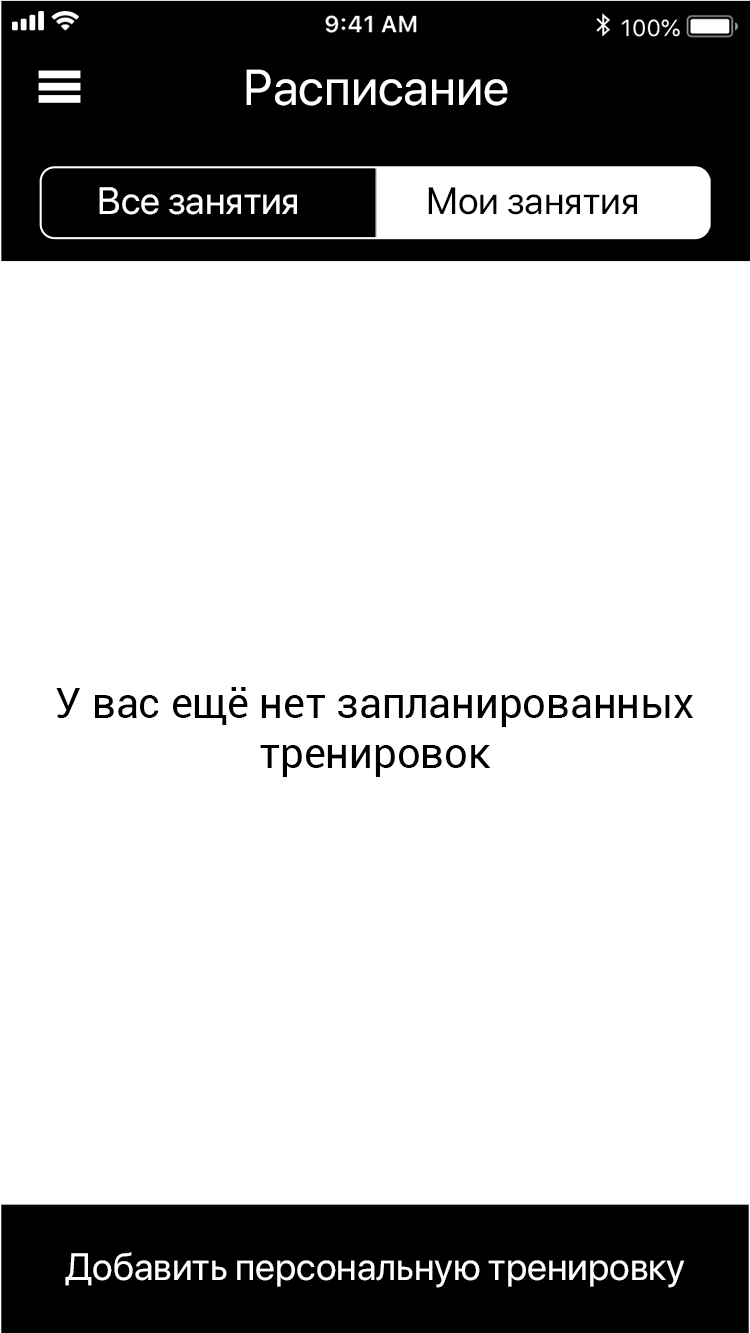
<style>
.page{position:relative;width:750px;height:1333px;background:#ffffff}
.page>*{position:absolute;margin:0}
.t1{font:50px "SFProDisplay-Regular";color:#ffffff}
.t2{font:38px "SFProDisplay-Regular";color:#ffffff}
.t3{font:38px "SFProDisplay-Regular";color:#000000}
.t4{font:41.7px "Roboto-Regular";color:#000000}
</style>
<div class="page">
<p class="t1" style="left:246px;top:69px;width:262px;height:37px">Расписание</p>
<p class="t2" style="left:99px;top:187px;width:198px;height:28px">Все занятия</p>
<p class="t3" style="left:428px;top:187px;width:209px;height:28px">Мои занятия</p>
<p class="t4" style="left:56px;top:687px;width:637px;height:90px;text-align:center">У вас ещё нет запланированных<br>тренировок</p>
<p class="t2" style="left:65px;top:1252px;width:620px;height:36px">Добавить персональную тренировку</p>
</div>
